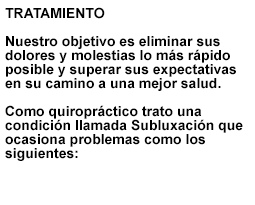
<style>
.page{position:relative;width:255px;height:205px;background:#ffffff}
.page>*{position:absolute;margin:0}
.t1{font:14px/14px "Arial-BoldMT";color:#000000}
</style>
<div class="page">
<p class="t1" style="left:5px;top:7px;width:238px;height:154px">TRATAMIENTO <br><br>Nuestro objetivo es eliminar sus dolores y molestias lo más rápido posible y superar sus expectativas en su camino a una mejor salud.<br><br>Como quiropráctico trato una <br>condición llamada Subluxación que ocasiona problemas como los siguientes:</p>
</div>
